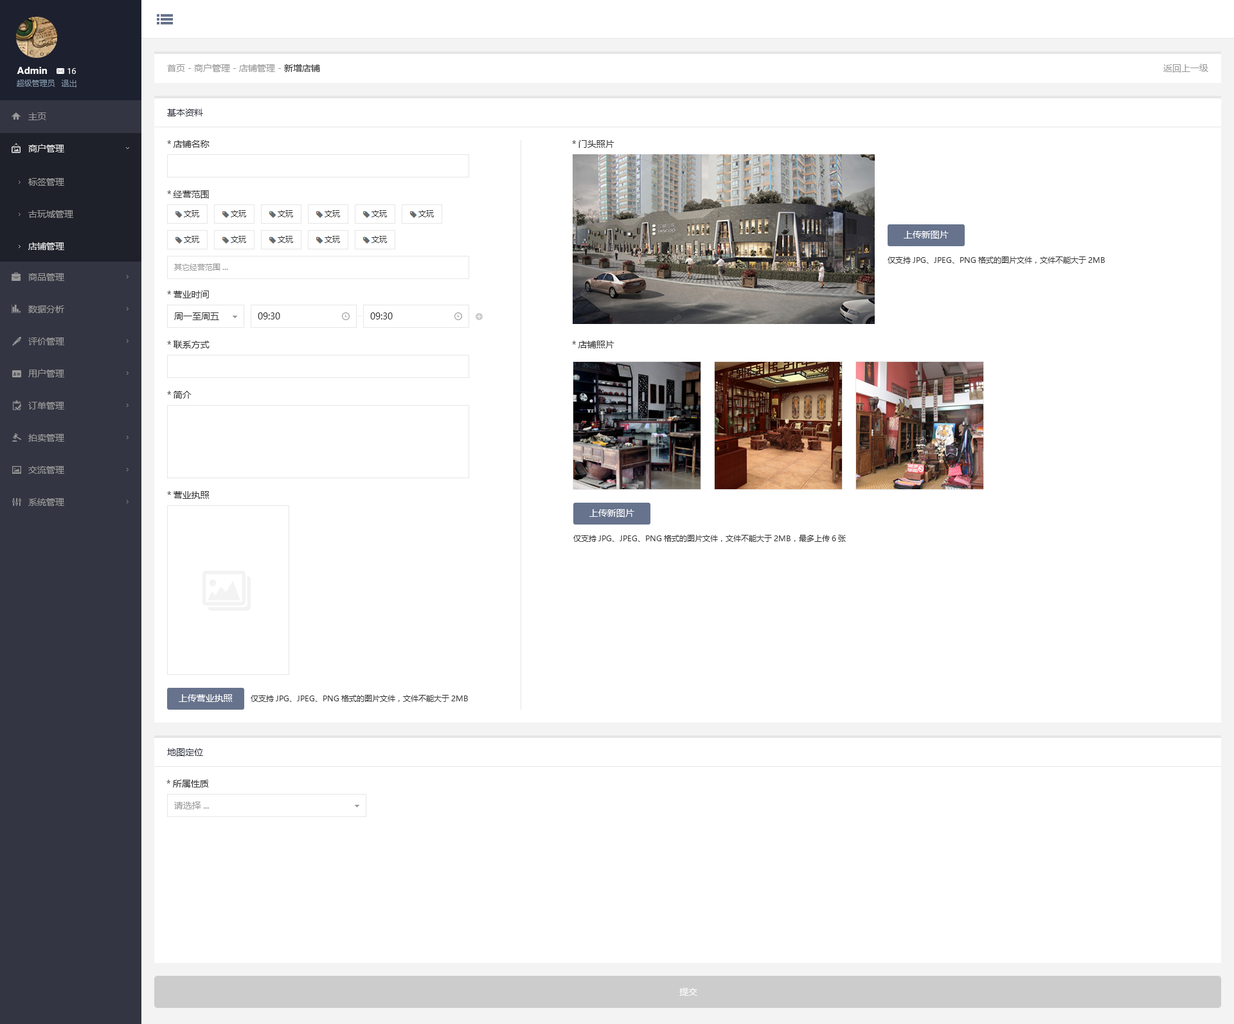
<style>
.page{position:relative;width:1234px;height:1024px;background:#ffffff}
.page>*{position:absolute;margin:0}
.t1{font:9px "MicrosoftYaHei";color:#999999}
.t2{font:9px "MicrosoftYaHei";color:#333333}
.t3{font:9px "MicrosoftYaHei-Bold";color:#ffffff}
.t4{font:7.7px "MicrosoftYaHei";color:#ffffff}
.t5{font:7.7px "MicrosoftYaHei";color:#8095a8}
.t6{font:9px/32.1px "MicrosoftYaHei";color:#999999}
.t7{font:9px/32.1px "MicrosoftYaHei";color:#e6e6e6}
.t8{font:9px "MicrosoftYaHei";color:#333642}
.t9{font:9px/50.1px "MicrosoftYaHei";color:#333333}
.t10{font:7.7px "MicrosoftYaHei";color:#333333}
.t11{font:9px "MicrosoftYaHei";color:#ffffff}
.t12{font:7.7px "MicrosoftYaHei";color:#999999}
</style>
<div class="page">
<p class="t1" style="left:167px;top:64px;width:153px;height:8px">首页 - 商户管理 - 店铺管理 - <span class="t2">新增店铺</span></p>
<p class="t1" style="left:1164px;top:64px;width:45px;height:9px">返回上一级</p>
<p class="t3" style="left:17px;top:67px;width:30px;height:7px">Admin</p>
<p class="t4" style="left:68px;top:68px;width:8px;height:6px">16</p>
<p class="t5" style="left:17px;top:80px;width:38px;height:7px">超级管理员</p>
<p class="t5" style="left:61px;top:80px;width:16px;height:7px">退出</p>
<p class="t6" style="left:28px;top:113px;width:36px;height:393px">主页<br><span class="t7">商户管理<br><br><br><br></span>商品管理<br>数据分析<br>评价管理<br>用户管理<br>订单管理<br>拍卖管理<br>交流管理<br>系统管理</p>
<p class="t8" style="left:167px;top:109px;width:36px;height:7px">基本资料</p>
<p class="t9" style="left:167px;top:140px;width:43px;height:359px">*店铺名称<br>*经营范围<br><br>*营业时间<br>*联系方式<br>*简介<br><br>*营业执照</p>
<p class="t6" style="left:28px;top:178px;width:45px;height:72px">标签管理<br>古玩城管理<br><span class="t7">店铺管理</span></p>
<p class="t10" style="left:184px;top:210px;width:15px;height:7px">文玩</p>
<p class="t11" style="left:904px;top:231px;width:45px;height:8px">上传新图片</p>
<p class="t10" style="left:888px;top:257px;width:217px;height:7px">仅支持JPG、JPEG、PNG格式的图片文件，文件不能大于2MB</p>
<p class="t12" style="left:174px;top:264px;width:54px;height:7px">其它经营范围...</p>
<p class="t2" style="left:174px;top:312px;width:45px;height:8px">周一至周五</p>
<p class="t2" style="left:258px;top:312px;width:22px;height:8px">09:30</p>
<p class="t2" style="left:370px;top:312px;width:23px;height:8px">09:30</p>
<p class="t11" style="left:590px;top:509px;width:45px;height:9px">上传新图片</p>
<p class="t10" style="left:573px;top:535px;width:273px;height:7px">仅支持JPG、JPEG、PNG格式的图片文件，文件不能大于2MB，最多上传6张</p>
<p class="t11" style="left:179px;top:694px;width:54px;height:8px">上传营业执照</p>
<p class="t10" style="left:251px;top:695px;width:217px;height:7px">仅支持JPG、JPEG、PNG格式的图片文件，文件不能大于2MB</p>
<p class="t8" style="left:167px;top:748px;width:36px;height:9px">地图定位</p>
<p class="t2" style="left:167px;top:780px;width:42px;height:8px">*所属性质</p>
<p class="t1" style="left:174px;top:802px;width:35px;height:7px">请选择...</p>
<p class="t11" style="left:680px;top:988px;width:18px;height:8px">提交</p>
</div>
